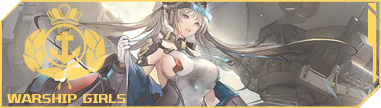
<style>
.page{position:relative;width:381px;height:108px}
.page>*{position:absolute;margin:0}
.t1{font:12.9px "HYZhuZiChaoRanTiW";letter-spacing:-0.025em;color:#ffd760}
</style>
<div class="page">
<p class="t1" style="left:7px;top:94px;width:119px;height:9px">WARSHIP GIRLS</p>
</div>
